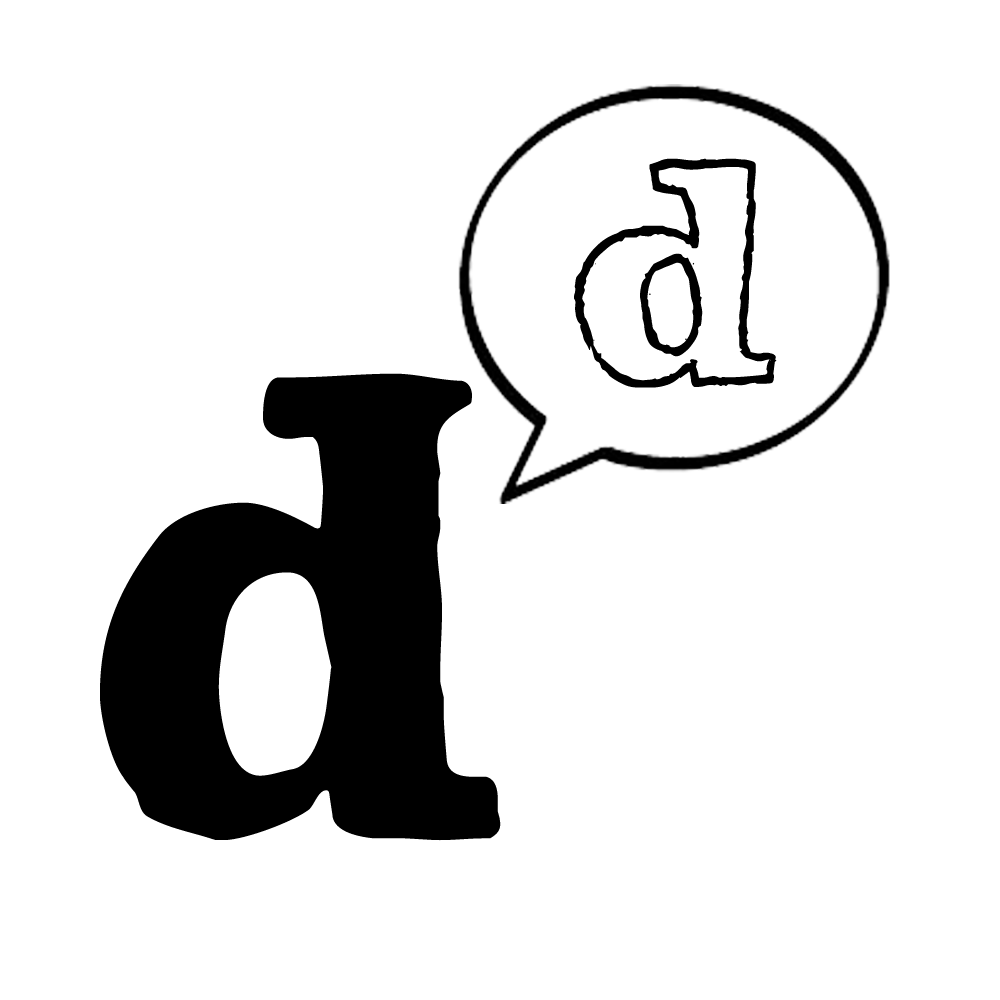
<style>
.page{position:relative;width:1000px;height:1000px;background:#ffffff}
.page>*{position:absolute;margin:0}
.t1{font:300px "LSTKClarendonBoldOutline";letter-spacing:0.05em;color:#000000}
.t2{font:600px "LSTKClarendonBold";letter-spacing:0.05em;color:#000000}
</style>
<div class="page">
<p class="t1" style="left:574px;top:158px;width:203px;height:230px">d</p>
<p class="t2" style="left:100px;top:373px;width:401px;height:468px">d</p>
</div>
